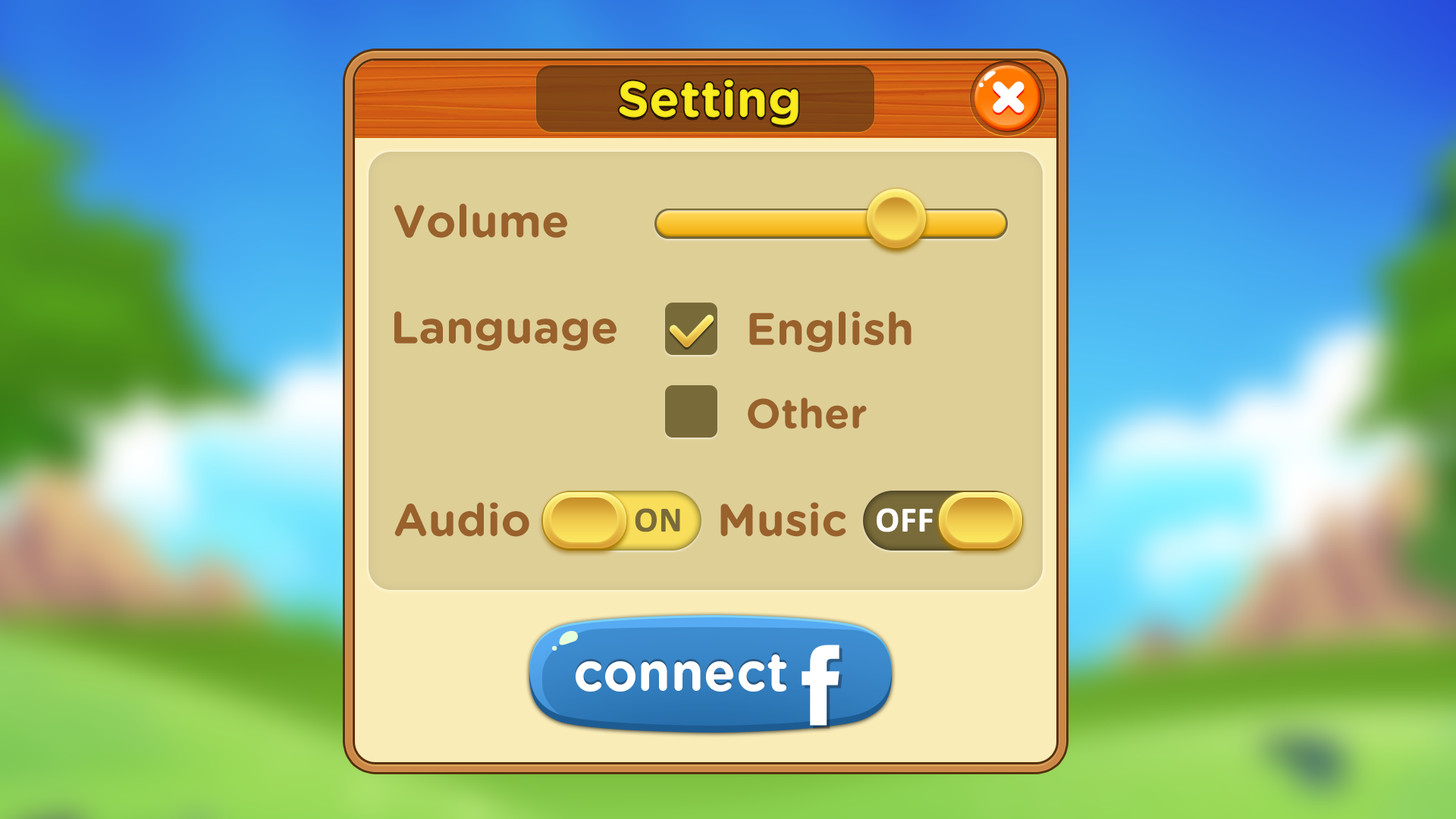
<style>
.page{position:relative;width:1456px;height:819px}
.page>*{position:absolute;margin:0}
.t1{font:50px "GothamRounded-Bold";color:#fff31e}
.t2{font:45.5px "GothamRounded-Bold";color:#99612c}
.t3{font:41.7px "GothamRounded-Bold";color:#99612c}
.t4{font:53.1px "GothamRounded-Bold";letter-spacing:-0.025em;color:#ffffff}
</style>
<div class="page">
<p class="t1" style="left:619px;top:80px;width:180px;height:45px;opacity:0.95">Setting</p>
<p class="t2" style="left:394px;top:203px;width:173px;height:35px">Volume</p>
<p class="t2" style="left:394px;top:311px;width:223px;height:40px">Language</p>
<p class="t2" style="left:749px;top:311px;width:163px;height:42px">English</p>
<p class="t3" style="left:748px;top:397px;width:119px;height:32px">Other</p>
<p class="t2" style="left:394px;top:502px;width:135px;height:35px">Audio</p>
<p class="t2" style="left:720px;top:502px;width:126px;height:35px">Music</p>
<p class="t4" style="left:576px;top:654px;width:210px;height:38px">connect</p>
</div>
